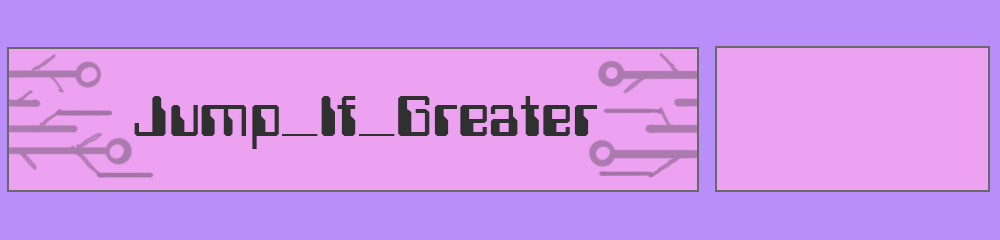
<style>
.page{position:relative;width:1000px;height:240px;background:#eda2f1}
.page>*{position:absolute;margin:0}
.t1{font:66.7px "Computerfont";color:#2f3030}
</style>
<div class="page">
<p class="t1" style="left:134px;top:96px;width:463px;height:53px">Jump_If_Greater</p>
</div>
